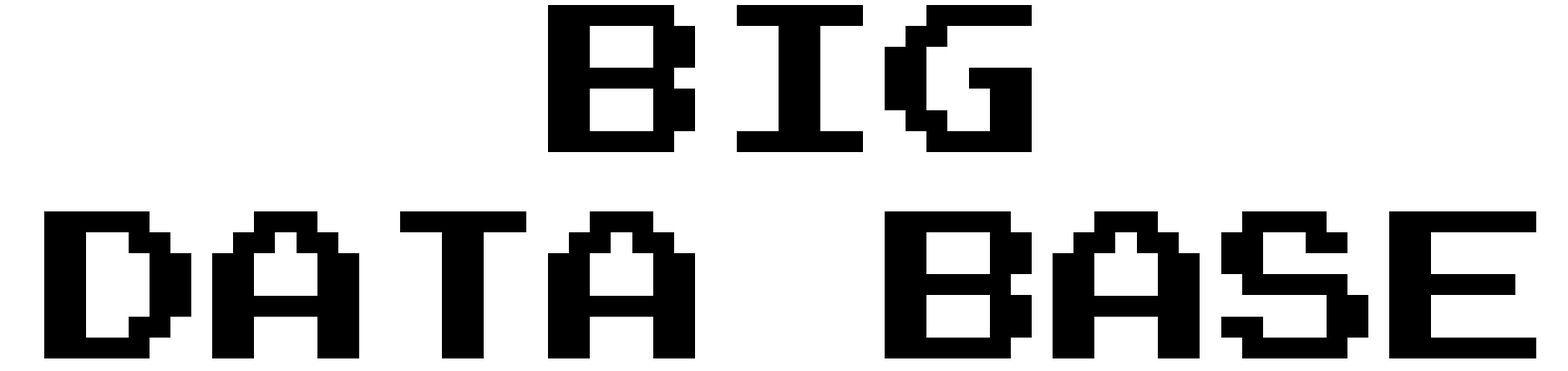
<style>
.page{position:relative;width:1568px;height:371px;background:#ffffff}
.page>*{position:absolute;margin:0}
.t1{font:171.8px "ArcadeNormal";color:#000000}
</style>
<div class="page">
<p class="t1" style="left:44px;top:5px;width:1492px;height:353px;text-align:center">BIG <br>DATA BASE</p>
</div>
